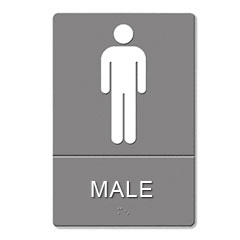
<style>
.page{position:relative;width:240px;height:240px;background:#ffffff}
.page>*{position:absolute;margin:0}
.t1{font:22px "ArialMT";letter-spacing:0.05em;color:#ffffff}
</style>
<div class="page">
<p class="t1" style="left:91px;top:181px;width:62px;height:16px">MALE</p>
</div>
